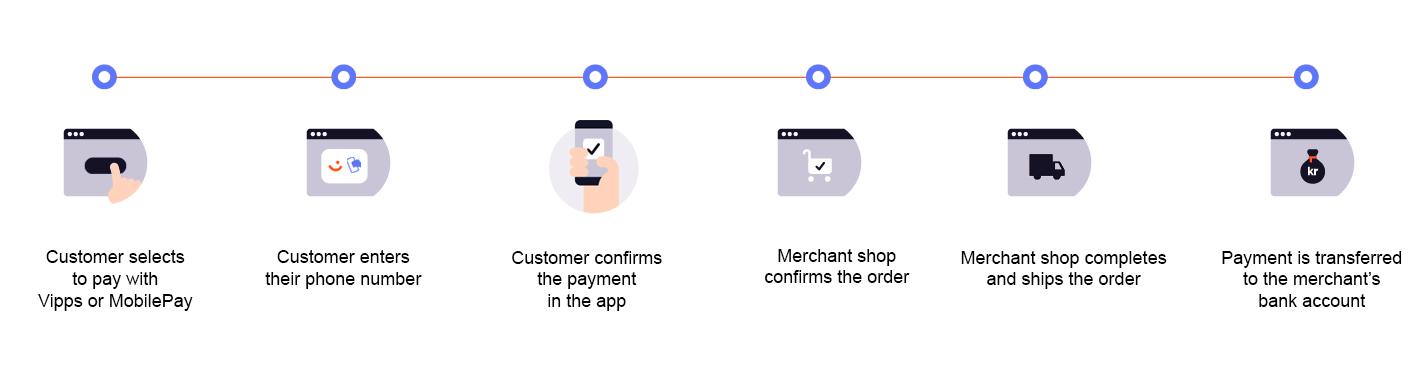
<style>
.page{position:relative;width:1428px;height:378px;background:#ffffff}
.page>*{position:absolute;margin:0}
.t1{font:18px "ArialMT";color:#000000}
</style>
<div class="page">
<p class="t1" style="left:38px;top:250px;width:155px;height:61px;text-align:center">Customer selects<br>to pay with<br>Vipps or MobilePay</p>
<p class="t1" style="left:265px;top:250px;width:157px;height:39px;text-align:center">Customer enters<br>their phone number</p>
<p class="t1" style="left:512px;top:251px;width:150px;height:60px;text-align:center">Customer confirms<br>the payment<br>in the app</p>
<p class="t1" style="left:765px;top:249px;width:145px;height:34px;text-align:center">Merchant shop<br>confirms the order</p>
<p class="t1" style="left:961px;top:251px;width:206px;height:38px;text-align:center">Merchant shop completes<br>and ships the order</p>
<p class="t1" style="left:1222px;top:251px;width:180px;height:56px;text-align:center">Payment is transferred<br>to the merchant’s<br>bank account</p>
</div>
